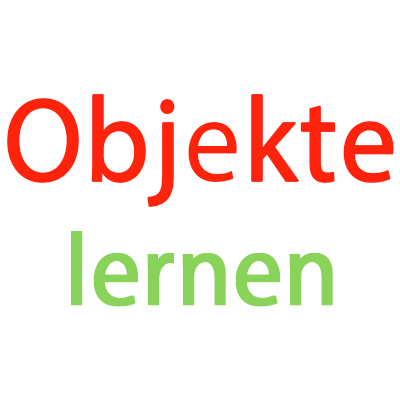
<style>
.page{position:relative;width:400px;height:400px;background:#ffffff}
.page>*{position:absolute;margin:0}
.t1{font:120.4px "MyriadPro-Regular";color:#ff230c;font-weight:bold;scale:0.94 1}
.t2{font:102.9px "MyriadPro-Regular";color:#89d359;font-weight:bold;scale:0.94 1}
</style>
<div class="page">
<p class="t1" style="left:7px;top:94px;width:387px;height:213px;text-align:center">Objekte<br><span class="t2">lernen</span></p>
</div>
